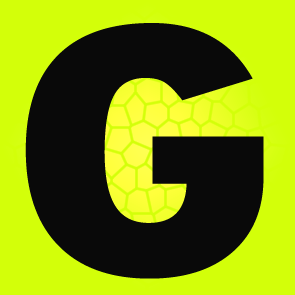
<style>
.page{position:relative;width:295px;height:295px;background:#090909}
.page>*{position:absolute;margin:0}
.t1{font:638.7px "TwCenMT-CondensedExtraBold";letter-spacing:0.1em;color:#090909;text-transform:uppercase;scale:1.33 1}
</style>
<div class="page">
<p class="t1" style="left:25px;top:23px;width:239px;height:256px">G</p>
</div>
